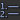
<style>
.page{position:relative;width:20px;height:20px;background:#333333}
.page>*{position:absolute;margin:0}
.t1{font:8px "LucidaGrande";letter-spacing:-0.025em}
</style>
<div class="page">
<p class="t1" style="left:0px;top:2px;width:7px;height:8px">1.</p>
<p class="t1" style="left:0px;top:10px;width:7px;height:8px">2.</p>
</div>
